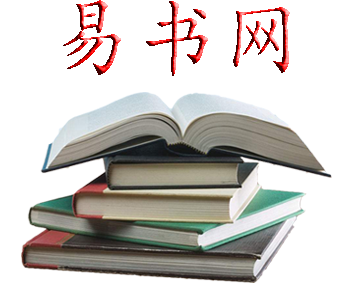
<style>
.page{position:relative;width:340px;height:283px;background:#ffffff}
.page>*{position:absolute;margin:0}
.t1{font:85px "STKaiti"}
</style>
<div class="page">
<p class="t1" style="left:63px;top:0px;width:227px;height:76px">易书网</p>
</div>
